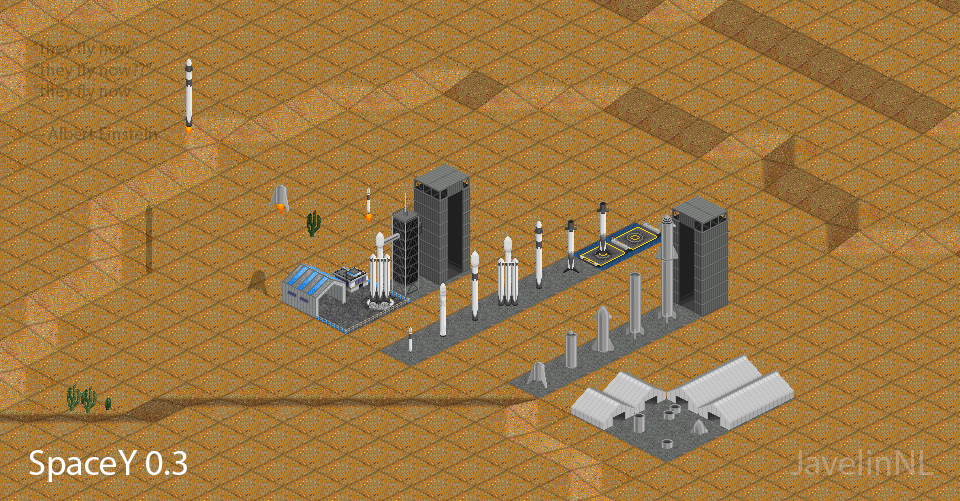
<style>
.page{position:relative;width:960px;height:501px;background:#9c8850}
.page>*{position:absolute;margin:0}
.t1{font:18px "MyriadPro-Regular"}
.t2{font:36px "MyriadPro-Regular"}
.t3{font:36px "MyriadPro-Regular";color:#ffffff}
</style>
<div class="page">
<p class="t1" style="left:33px;top:41px;width:124px;height:99px">“they fly now”<br>“they fly now??”<br>“they fly now”<br><br>-- Albert Einstein</p>
<p class="t2" style="left:791px;top:449px;width:143px;height:26px">JavelinNL</p>
<p class="t3" style="left:29px;top:450px;width:158px;height:32px">SpaceY 0.3</p>
</div>
